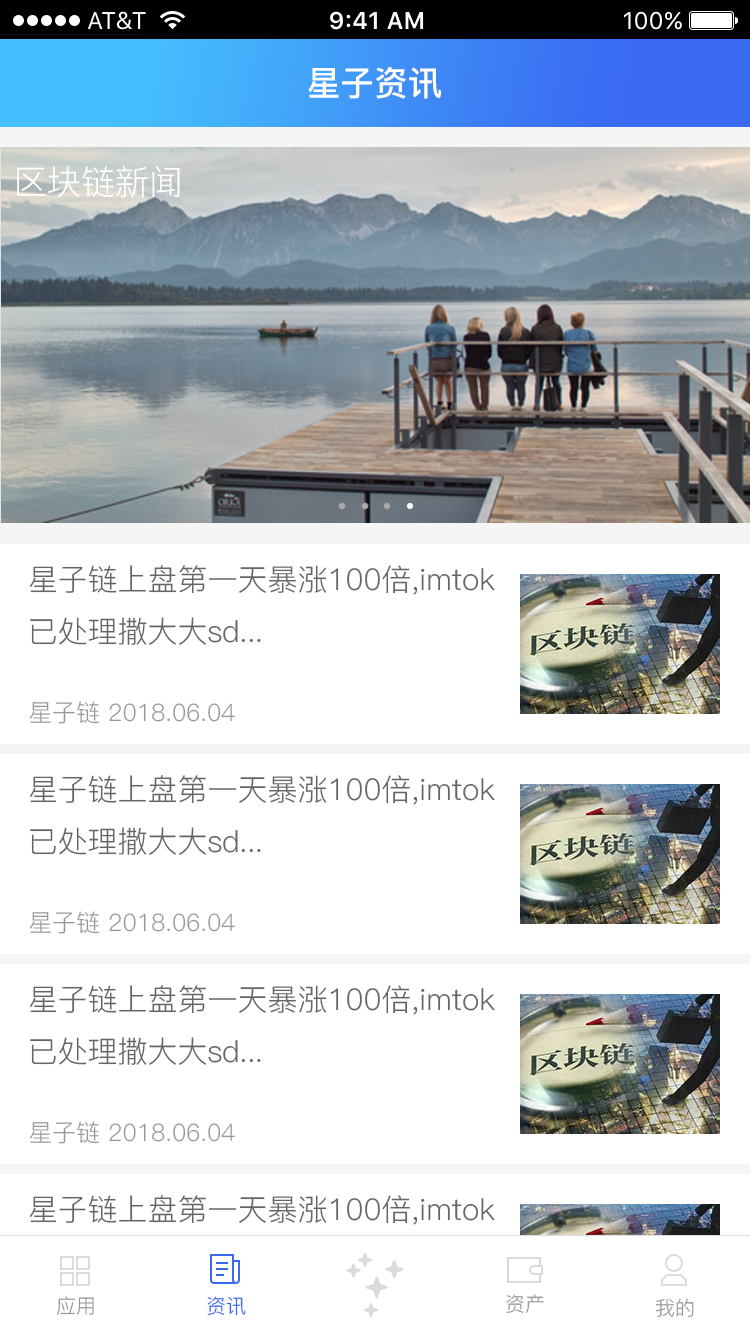
<style>
.page{position:relative;width:750px;height:1334px;background:#ffffff}
.page>*{position:absolute;margin:0}
.t1{font:34px "PingFang-SC-Bold";color:#ffffff}
.t2{font:34px "PingFang-SC-Regular";color:#ffffff}
.t3{font:30px "PingFang-SC-Regular";color:#666666}
.t4{font:24px "PingFang-SC-Regular";color:#999999}
.t5{font:20px "PingFang-SC-Regular";color:#999999}
.t6{font:20px "PingFang-SC-Regular";color:#3a6af2}
</style>
<div class="page">
<p class="t1" style="left:308px;top:67px;width:134px;height:32px">星子资讯</p>
<p class="t2" style="left:17px;top:165px;width:163px;height:33px">区块链新闻</p>
<p class="t3" style="left:29px;top:565px;width:466px;height:80px">星子链上盘第一天暴涨100倍,imtok<br>已处理撒大大sd...</p>
<p class="t4" style="left:29px;top:701px;width:206px;height:23px">星子链 2018.06.04</p>
<p class="t3" style="left:29px;top:775px;width:466px;height:80px">星子链上盘第一天暴涨100倍,imtok<br>已处理撒大大sd...</p>
<p class="t4" style="left:29px;top:911px;width:206px;height:23px">星子链 2018.06.04</p>
<p class="t3" style="left:29px;top:985px;width:466px;height:80px">星子链上盘第一天暴涨100倍,imtok<br>已处理撒大大sd...</p>
<p class="t4" style="left:29px;top:1121px;width:206px;height:23px">星子链 2018.06.04</p>
<p class="t3" style="left:29px;top:1195px;width:466px;height:80px">星子链上盘第一天暴涨100倍,imtok<br>已处理撒大大sd...</p>
<p class="t5" style="left:57px;top:1296px;width:37px;height:19px">应用</p>
<p class="t6" style="left:207px;top:1296px;width:39px;height:20px">资讯</p>
<p class="t5" style="left:506px;top:1294px;width:38px;height:19px">资产</p>
<p class="t5" style="left:655px;top:1298px;width:39px;height:19px">我的</p>
</div>
